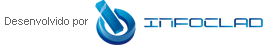
<style>
.page{position:relative;width:270px;height:48px;background:#ffffff}
.page>*{position:absolute;margin:0}
.t1{font:11px "ArialMT";color:#666666}
</style>
<div class="page">
<p class="t1" style="left:5px;top:17px;width:83px;height:10px">Desenvolvido por</p>
</div>
